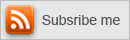
<style>
.page{position:relative;width:130px;height:40px;background:#e6e7e8}
.page>*{position:absolute;margin:0}
.t1{font:14px "ArialMT";color:#58595b}
</style>
<div class="page">
<p class="t1" style="left:42px;top:15px;width:78px;height:10px">Subsribe me</p>
</div>
